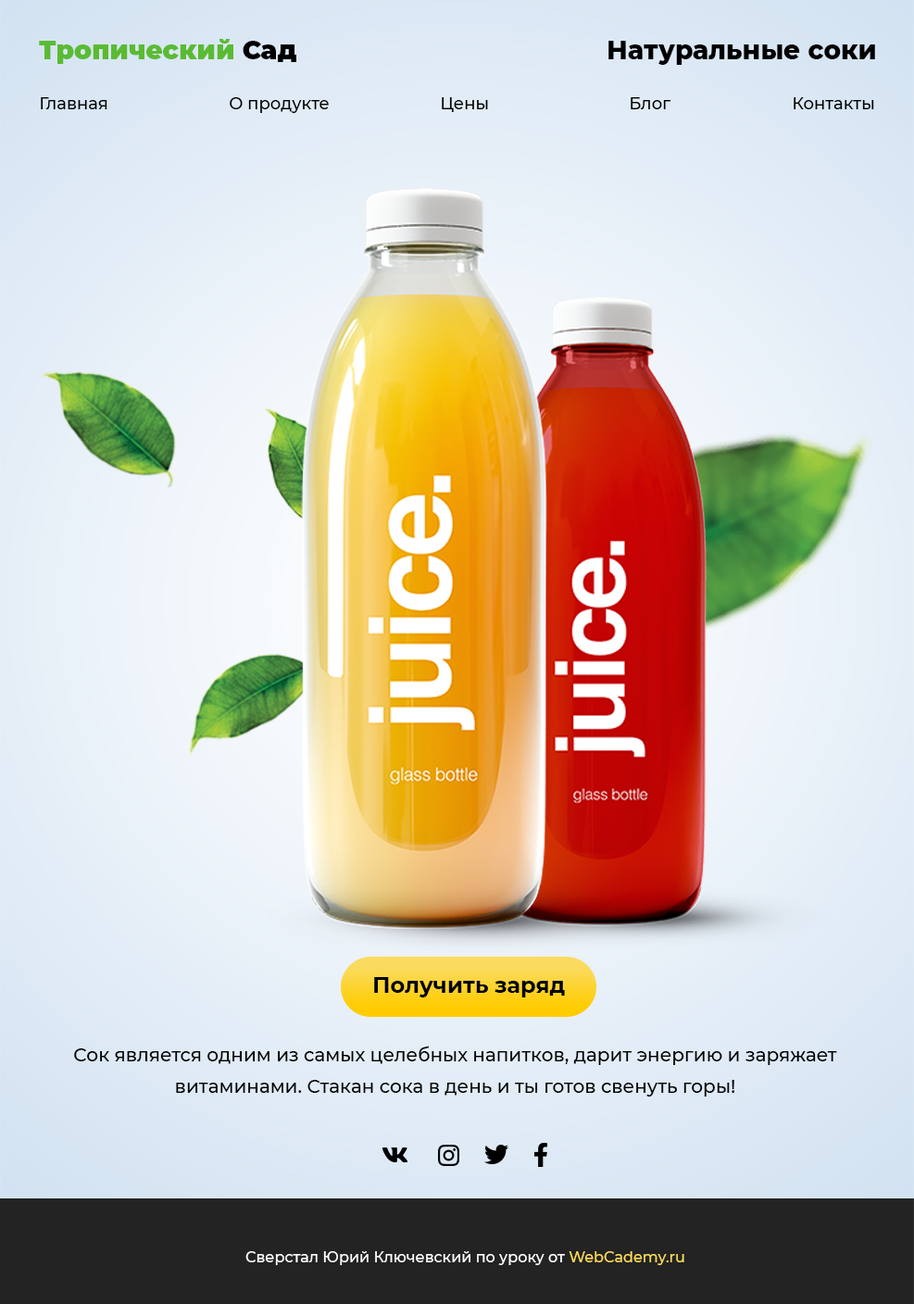
<style>
.page{position:relative;width:914px;height:1304px}
.page>*{position:absolute;margin:0}
.t1{font:25.9px "Montserrat-Black";color:#5abb33}
.t2{font:25.9px "Montserrat-Black";color:#000000}
.t3{font:25.9px "Montserrat-ExtraBold";color:#000000}
.t4{font:16.7px "Montserrat-Medium";color:#000000}
.t5{font:22.2px "Montserrat-Bold";color:#000000}
.t6{font:18.5px/31.5px "Montserrat-Medium";color:#000000}
.t7{font:14.8px "Montserrat-Medium";color:#ffffff}
.t8{font:14.8px "Montserrat-Medium";color:#fada5a}
</style>
<div class="page">
<p class="t1" style="left:39px;top:39px;width:257px;height:25px">Тропический<span class="t2"> Сад</span></p>
<p class="t3" style="left:609px;top:41px;width:266px;height:24px">Натуральные соки</p>
<p class="t4" style="left:41px;top:97px;width:66px;height:12px">Главная</p>
<p class="t4" style="left:230px;top:97px;width:99px;height:16px">О продукте</p>
<p class="t4" style="left:442px;top:97px;width:46px;height:15px">Цены</p>
<p class="t4" style="left:631px;top:97px;width:41px;height:12px">Блог</p>
<p class="t4" style="left:794px;top:97px;width:80px;height:12px">Контакты</p>
<p class="t5" style="left:374px;top:977px;width:191px;height:21px">Получить заряд</p>
<p class="t6" style="left:74px;top:1046px;width:763px;height:51px;text-align:center">Cок является одним из самых целебных напитков, дарит энергию и заряжает витаминами. Стакан сока в день и ты готов свенуть горы!</p>
<p class="t7" style="left:245px;top:1251px;width:440px;height:14px">Сверстал Юрий Ключевский по уроку от <span class="t8">WebCademy.ru</span></p>
</div>
